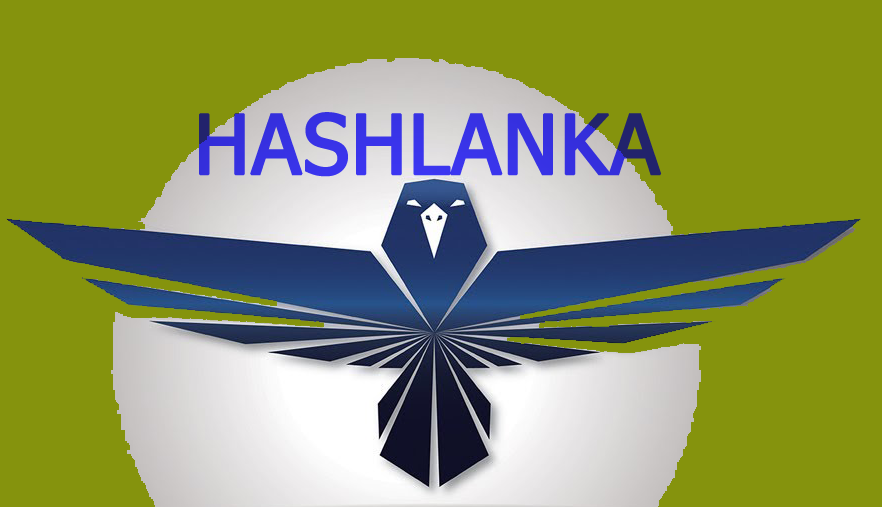
<style>
.page{position:relative;width:882px;height:507px;background:#85930d}
.page>*{position:absolute;margin:0}
.t1{font:82px "Tahoma";color:#3731e2;font-variant:small-caps;font-weight:bold}
</style>
<div class="page">
<p class="t1" style="left:199px;top:112px;width:463px;height:65px">HASHLANKA</p>
</div>
